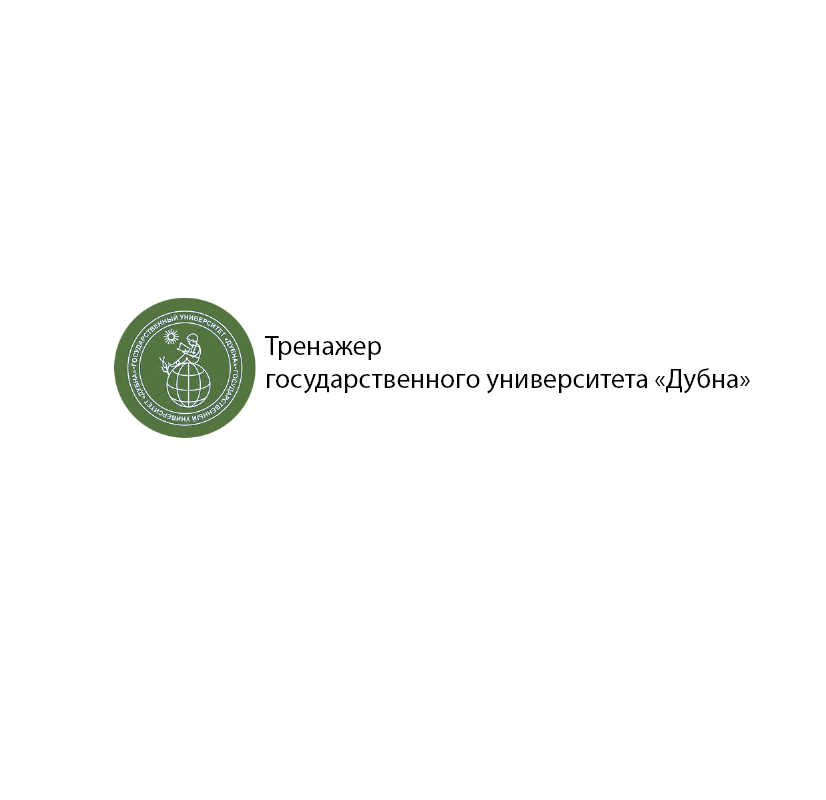
<style>
.page{position:relative;width:826px;height:800px;background:#ffffff}
.page>*{position:absolute;margin:0}
.t1{font:27.5px "MyriadPro-Regular";color:#000000}
</style>
<div class="page">
<p class="t1" style="left:265px;top:336px;width:485px;height:58px">Тренажер<br>государственного университета «Дубна»</p>
</div>
